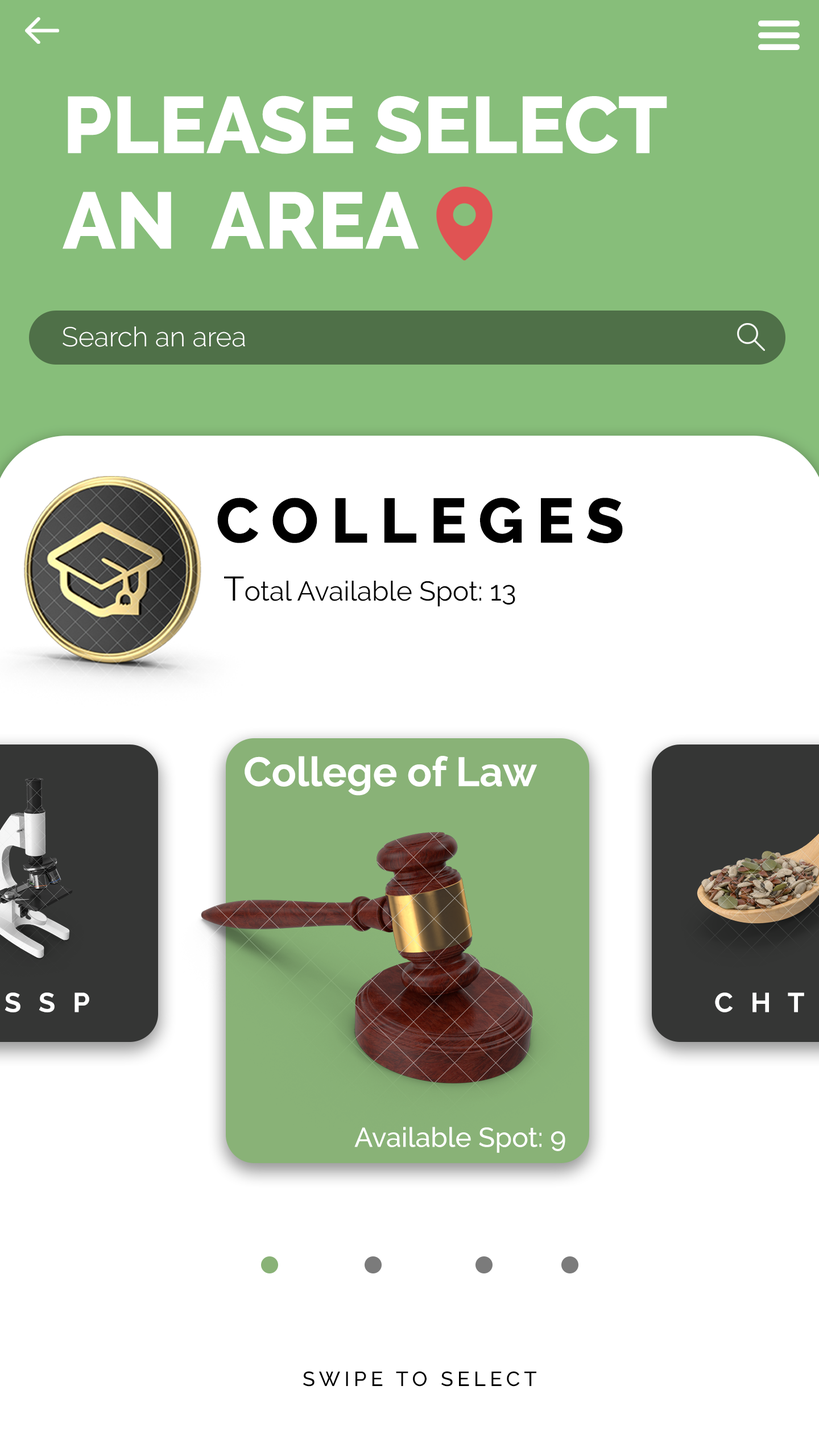
<style>
.page{position:relative;width:819px;height:1456px;background:#ffffff}
.page>*{position:absolute;margin:0}
.t1{font:79.6px "Raleway-ExtraBold";color:#ffffff}
.t2{font:27.3px "Raleway-Light";color:#ffffff}
.t3{font:62.6px "Raleway-ExtraBold";letter-spacing:0.2em;color:#000000}
.t4{font:27.3px "Raleway-Regular";color:#000000}
.t5{font:34.1px "Raleway-Regular";color:#000000}
.t6{font:40.9px "Raleway-Bold";color:#ffffff}
.t7{font:27.3px "Raleway-Medium";color:#ffffff}
.t8{font:20.5px "Raleway-Medium";letter-spacing:0.2em;color:#000000}
</style>
<div class="page">
<p class="t1" style="left:63px;top:96px;width:604px;height:153px">PLEASE SELECT <br>AN  AREA</p>
<p class="t2" style="left:63px;top:326px;width:182px;height:21px">Search an area</p>
<p class="t3" style="left:217px;top:498px;width:406px;height:45px">COLLEGES</p>
<p class="t4" style="left:224px;top:576px;width:291px;height:31px"><span class="t5">T</span>otal Available Spot: 13</p>
<p class="t6" style="left:245px;top:756px;width:292px;height:40px">College of Law</p>
<p class="t7" style="left:354px;top:1127px;width:211px;height:26px">Available Spot: 9</p>
<p class="t8" style="left:303px;top:1371px;width:233px;height:16px">SWIPE TO SELECT</p>
</div>
